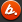
<style>
.page{position:relative;width:22px;height:22px}
.page>*{position:absolute;margin:0}
.t1{font:14px "VampiroOne-Regular";color:#ffffff}
</style>
<div class="page">
<p class="t1" style="left:4px;top:4px;width:13px;height:11px">b.</p>
</div>
